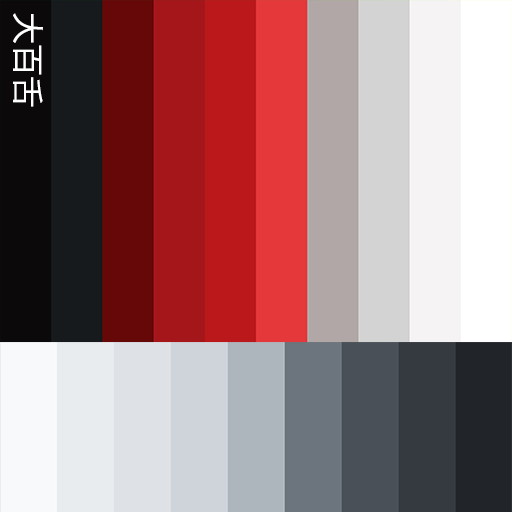
<style>
.page{position:relative;width:512px;height:512px}
.page>*{position:absolute;margin:0}
.t1{font:32px "KozGoPr6N-Regular";color:#ffffff}
</style>
<div class="page">
<p class="t1" style="left:13px;top:13px;width:30px;height:94px;rotate:90deg">大百舌</p>
</div>
